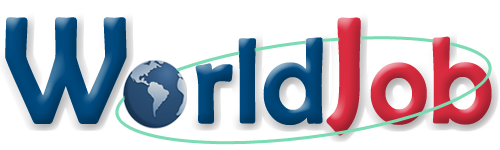
<style>
.page{position:relative;width:500px;height:150px;background:#ffffff}
.page>*{position:absolute;margin:0}
.t1{font:150px "BerlinSansFB-Reg";color:#004a7f;font-weight:bold;scale:0.94 1}
.t2{font:120px "BerlinSansFB-Reg";color:#004a7f;font-weight:bold;scale:0.94 1}
.t3{font:150px "BerlinSansFB-Reg";color:#db2c40;font-weight:bold;scale:0.94 1}
.t4{font:120px "BerlinSansFB-Reg";color:#db2c40;font-weight:bold;scale:0.94 1}
</style>
<div class="page">
<p class="t1" style="left:5px;top:17px;width:122px;height:107px">W</p>
<p class="t2" style="left:195px;top:17px;width:297px;height:119px">rld<span class="t3">J</span><span class="t4">ob</span></p>
</div>
